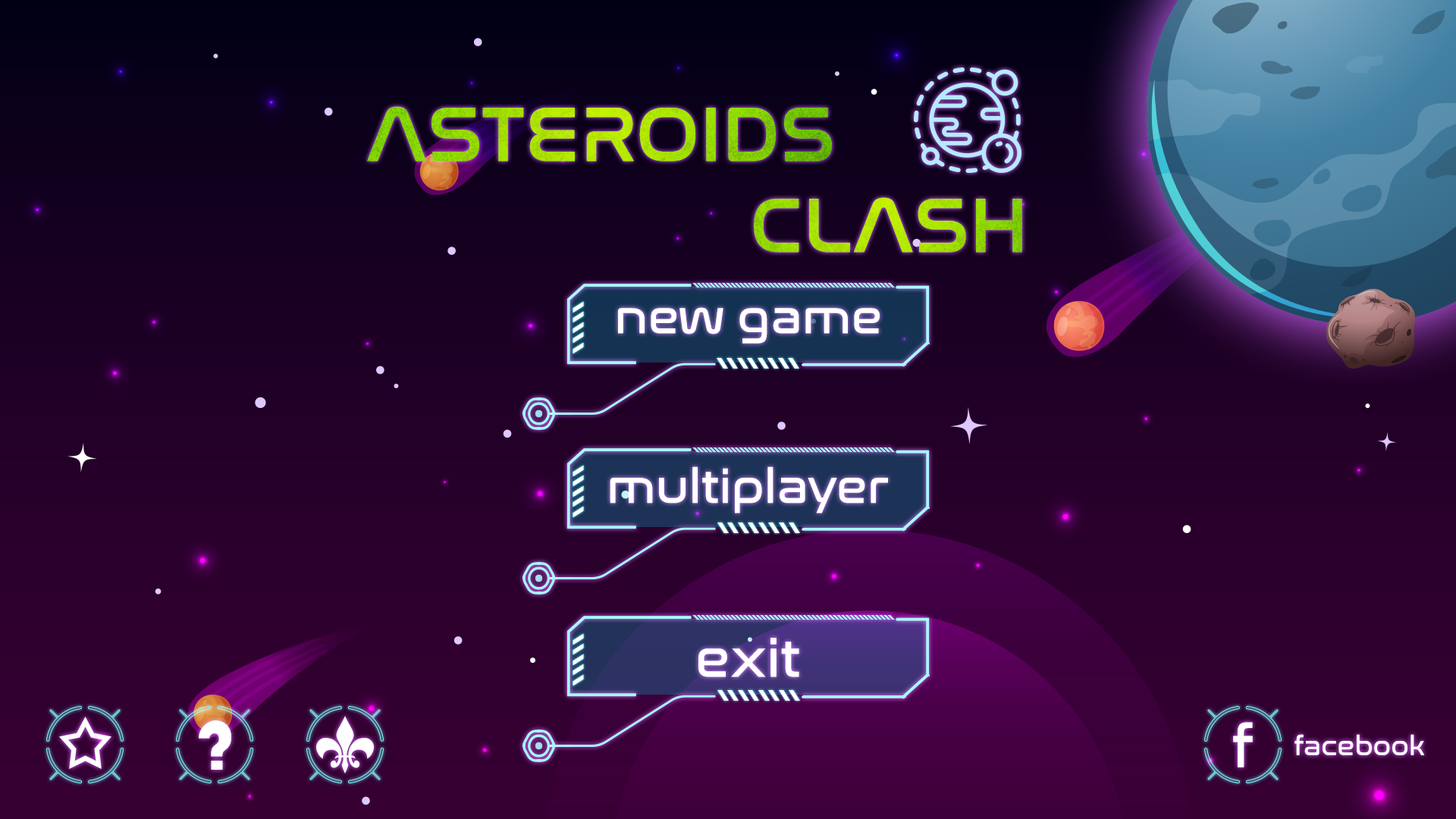
<style>
.page{position:relative;width:1456px;height:819px}
.page>*{position:absolute;margin:0}
.t1{font:79px "NasalizationRg-Regular";text-transform:uppercase}
.t2{font:47.6px "NasalizationRg-Regular";color:#ffffff}
.t3{font:53.7px "NasalizationRg-Regular";color:#ffffff}
.t4{font:59.2px "NasalizationRg-Regular";color:#ffffff}
.t5{font:26.6px "NasalizationRg-Regular";color:#ffffff}
</style>
<div class="page">
<p class="t1" style="left:367px;top:106px;width:465px;height:56px">Asteroids</p>
<p class="t1" style="left:754px;top:197px;width:268px;height:56px">Clash</p>
<p class="t2" style="left:618px;top:307px;width:262px;height:37px">new game</p>
<p class="t2" style="left:610px;top:466px;width:278px;height:47px">multiplayer</p>
<p class="t3" style="left:698px;top:638px;width:101px;height:39px">exit</p>
<p class="t4" style="left:1233px;top:722px;width:20px;height:45px">f</p>
<p class="t5" style="left:1294px;top:734px;width:131px;height:21px">facebook</p>
</div>
